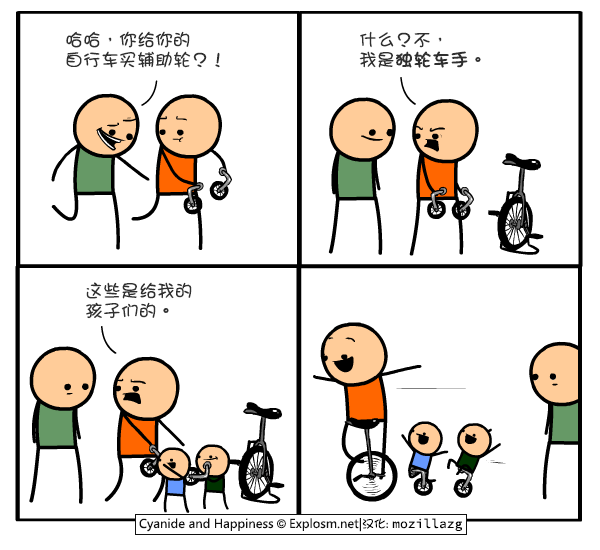
<style>
.page{position:relative;width:600px;height:550px;background:#ffffff}
.page>*{position:absolute;margin:0}
.t1{font:18px/20px "DFGirl";color:#2f2f2f}
.t2{font:18px/20px "DFGirl";color:#2f2f2f;font-weight:bold}
</style>
<div class="page">
<p class="t1" style="left:66px;top:31px;width:154px;height:37px">哈哈，你给你的<br>自行车买辅助轮？！</p>
<p class="t1" style="left:359px;top:31px;width:122px;height:37px">什么？不，<br>我是<span class="t2">独轮车手</span>。</p>
<p class="t1" style="left:86px;top:282px;width:106px;height:37px">这些是给我的<br>孩子们的。</p>
</div>
